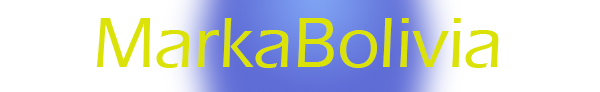
<style>
.page{position:relative;width:600px;height:92px;background:#ffffff}
.page>*{position:absolute;margin:0}
.t1{font:72.9px "ErasITC-Medium";color:#dae207}
</style>
<div class="page">
<p class="t1" style="left:96px;top:18px;width:403px;height:50px">MarkaBolivia</p>
</div>
